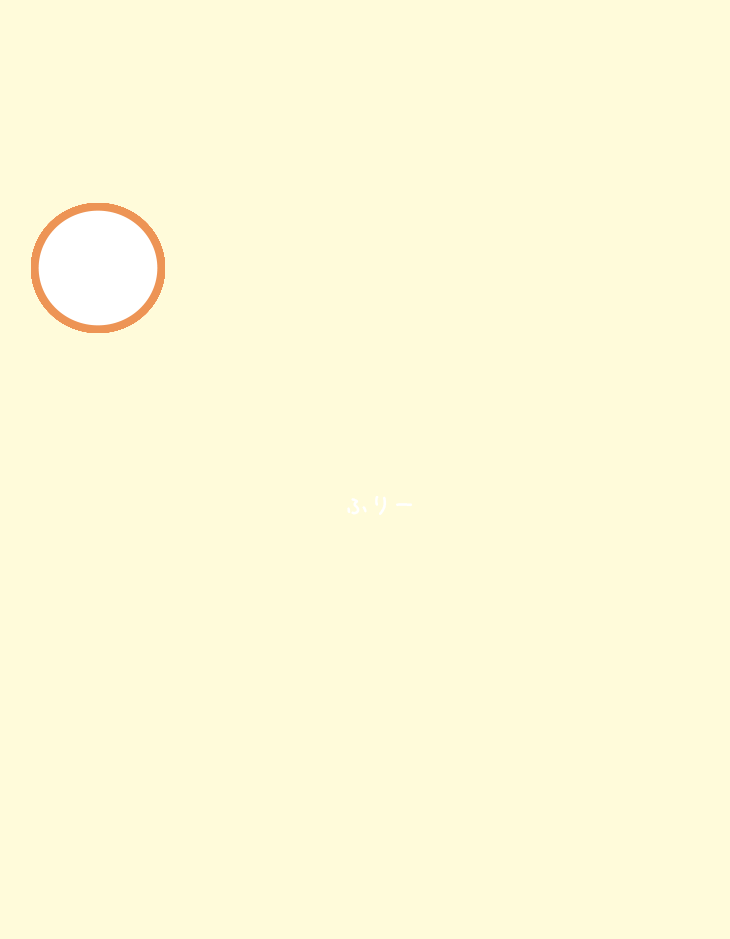
<style>
.page{position:relative;width:730px;height:939px;background:#fffbda}
.page>*{position:absolute;margin:0}
.t1{font:32px "APJapanesefont";color:#ffffff}
</style>
<div class="page">
<p class="t1" style="left:347px;top:496px;width:65px;height:19px">ふりー</p>
</div>
